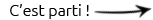
<style>
.page{position:relative;width:153px;height:20px;background:#ffffff}
.page>*{position:absolute;margin:0}
.t1{font:16px "Ubuntu-Light";color:#000000}
</style>
<div class="page">
<p class="t1" style="left:10px;top:4px;width:79px;height:15px">C’est parti !</p>
</div>
